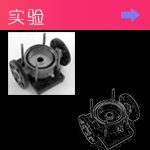
<style>
.page{position:relative;width:150px;height:150px;background:#000000}
.page>*{position:absolute;margin:0}
.t1{font:16.7px "RTWSYueGoTrial-ExLight";letter-spacing:0.12em;color:#fafafa;font-weight:bold}
</style>
<div class="page">
<p class="t1" style="left:8px;top:9px;width:36px;height:16px">实验</p>
</div>
